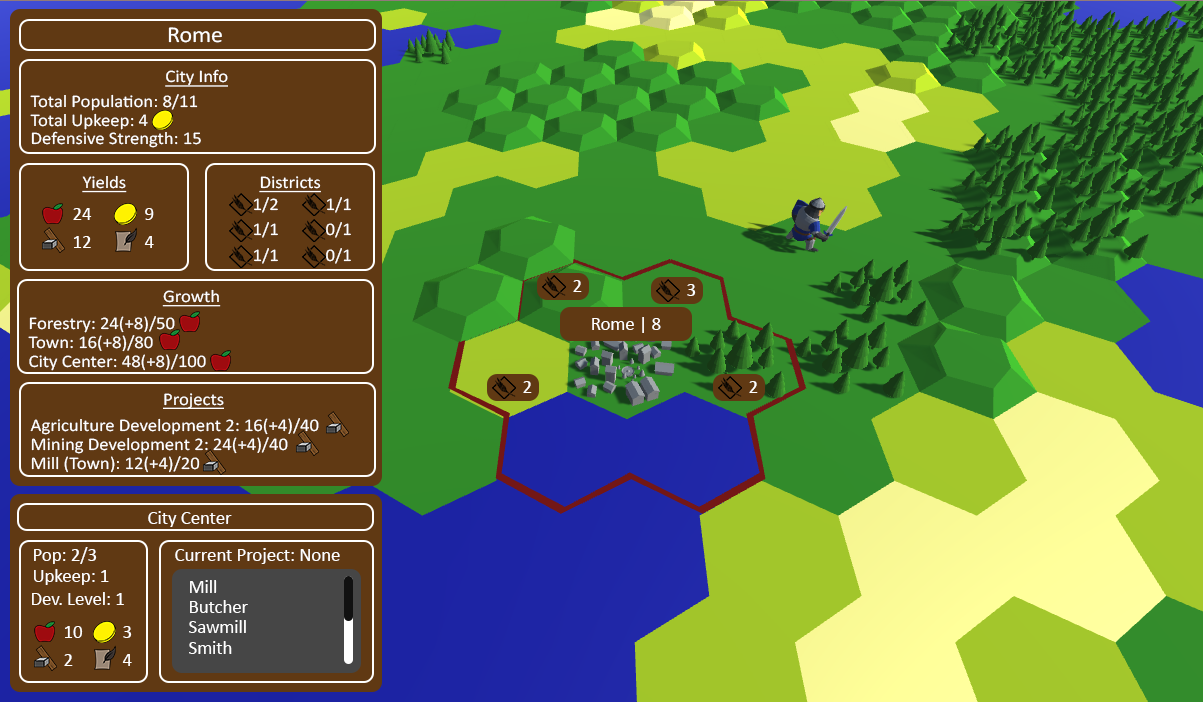
<style>
.page{position:relative;width:1203px;height:702px;background:#603913}
.page>*{position:absolute;margin:0}
.t1{font:22.8px "Calibri";color:#ffffff;scale:1.05 1}
.t2{font:17.8px "Calibri";color:#ffffff;text-decoration:underline;scale:1.05 1}
.t3{font:17.8px "Calibri";color:#ffffff;scale:1.05 1}
.t4{font:18.7px "Calibri";color:#ffffff}
</style>
<div class="page">
<p class="t1" style="left:168px;top:27px;width:54px;height:16px">Rome</p>
<p class="t2" style="left:165px;top:69px;width:63px;height:18px">City Info</p>
<p class="t3" style="left:30px;top:94px;width:168px;height:17px">Total Population: 8/11</p>
<p class="t3" style="left:30px;top:113px;width:118px;height:17px">Total Upkeep: 4</p>
<p class="t3" style="left:31px;top:131px;width:170px;height:17px">Defensive Strength: 15</p>
<p class="t2" style="left:82px;top:175px;width:45px;height:18px">Yields</p>
<p class="t2" style="left:259px;top:176px;width:62px;height:17px">Districts</p>
<p class="t3" style="left:254px;top:197px;width:24px;height:16px">1/2</p>
<p class="t3" style="left:327px;top:197px;width:24px;height:16px">1/1</p>
<p class="t4" style="left:73px;top:208px;width:19px;height:12px">24</p>
<p class="t4" style="left:145px;top:208px;width:9px;height:12px">9</p>
<p class="t3" style="left:254px;top:222px;width:24px;height:16px">1/1</p>
<p class="t3" style="left:326px;top:222px;width:25px;height:16px">0/1</p>
<p class="t4" style="left:74px;top:236px;width:17px;height:12px">12</p>
<p class="t4" style="left:144px;top:236px;width:10px;height:12px">4</p>
<p class="t3" style="left:254px;top:248px;width:24px;height:16px">1/1</p>
<p class="t3" style="left:326px;top:248px;width:25px;height:16px">0/1</p>
<p class="t4" style="left:573px;top:280px;width:9px;height:12px">2</p>
<p class="t2" style="left:162px;top:289px;width:59px;height:18px">Growth</p>
<p class="t4" style="left:687px;top:284px;width:9px;height:12px">3</p>
<p class="t3" style="left:29px;top:316px;width:146px;height:17px">Forestry: 24(+8)/50</p>
<p class="t4" style="left:592px;top:317px;width:69px;height:16px">Rome | 8</p>
<p class="t3" style="left:28px;top:335px;width:125px;height:17px">Town: 16(+8)/80</p>
<p class="t3" style="left:29px;top:354px;width:177px;height:17px">City Center: 48(+8)/100</p>
<p class="t4" style="left:523px;top:381px;width:9px;height:12px">2</p>
<p class="t4" style="left:749px;top:381px;width:9px;height:12px">2</p>
<p class="t2" style="left:163px;top:393px;width:61px;height:16px">Projects</p>
<p class="t3" style="left:30px;top:418px;width:289px;height:17px">Agriculture Development 2: 16(+4)/40</p>
<p class="t3" style="left:31px;top:437px;width:257px;height:17px">Mining Development 2: 24(+4)/40</p>
<p class="t3" style="left:31px;top:456px;width:169px;height:17px">Mill (Town): 12(+4)/20</p>
<p class="t4" style="left:148px;top:511px;width:84px;height:16px">City Center</p>
<p class="t4" style="left:34px;top:547px;width:63px;height:17px">Pop: 2/3</p>
<p class="t4" style="left:175px;top:548px;width:165px;height:16px">Current Project: None</p>
<p class="t4" style="left:34px;top:569px;width:75px;height:16px">Upkeep: 1</p>
<p class="t4" style="left:190px;top:580px;width:27px;height:13px">Mill</p>
<p class="t4" style="left:32px;top:592px;width:92px;height:13px">Dev. Level: 1</p>
<p class="t4" style="left:190px;top:600px;width:58px;height:13px">Butcher</p>
<p class="t4" style="left:65px;top:626px;width:18px;height:12px">10</p>
<p class="t4" style="left:123px;top:626px;width:9px;height:12px">3</p>
<p class="t4" style="left:189px;top:620px;width:57px;height:13px">Sawmill</p>
<p class="t4" style="left:189px;top:641px;width:43px;height:13px">Smith</p>
<p class="t4" style="left:64px;top:654px;width:9px;height:12px">2</p>
<p class="t4" style="left:122px;top:654px;width:10px;height:12px">4</p>
</div>
